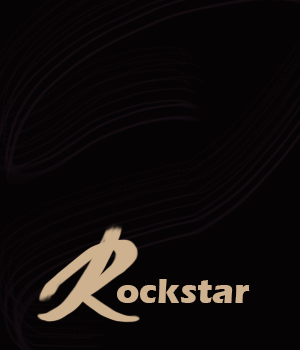
<style>
.page{position:relative;width:300px;height:350px;background:#050304}
.page>*{position:absolute;margin:0}
.t1{font:36px "ErasITC-Bold";color:#ceb18f}
</style>
<div class="page">
<p class="t1" style="left:117px;top:279px;width:133px;height:24px">ockstar</p>
</div>
